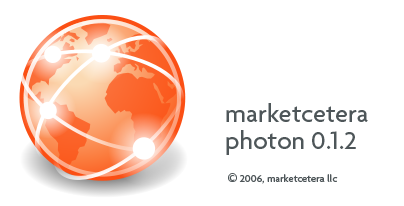
<style>
.page{position:relative;width:404px;height:206px;background:#ffffff}
.page>*{position:absolute;margin:0}
.t1{font:26.7px "Agenda-Medium";color:#4e5659}
.t2{font:10.7px "Agenda-Medium";color:#4e5659}
.t3{font:18.7px "Agenda-Medium";color:#4e5659}
</style>
<div class="page">
<p class="t1" style="left:226px;top:103px;width:142px;height:52px">marketcetera<br>photon 0.1.2</p>
<p class="t2" style="left:228px;top:173px;width:110px;height:11px"><span class="t3">©</span> 2006, marketcetera llc</p>
</div>
